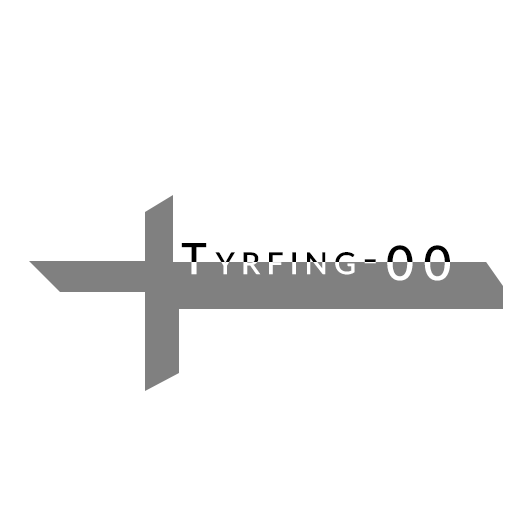
<style>
.page{position:relative;width:512px;height:512px;background:#ffffff}
.page>*{position:absolute;margin:0}
.t1{font:43.5px "Lato-Semibold";letter-spacing:0.2em;font-variant:small-caps}
</style>
<div class="page">
<p class="t1" style="left:181px;top:243px;width:195px;height:32px">Tyrfing-</p>
</div>
